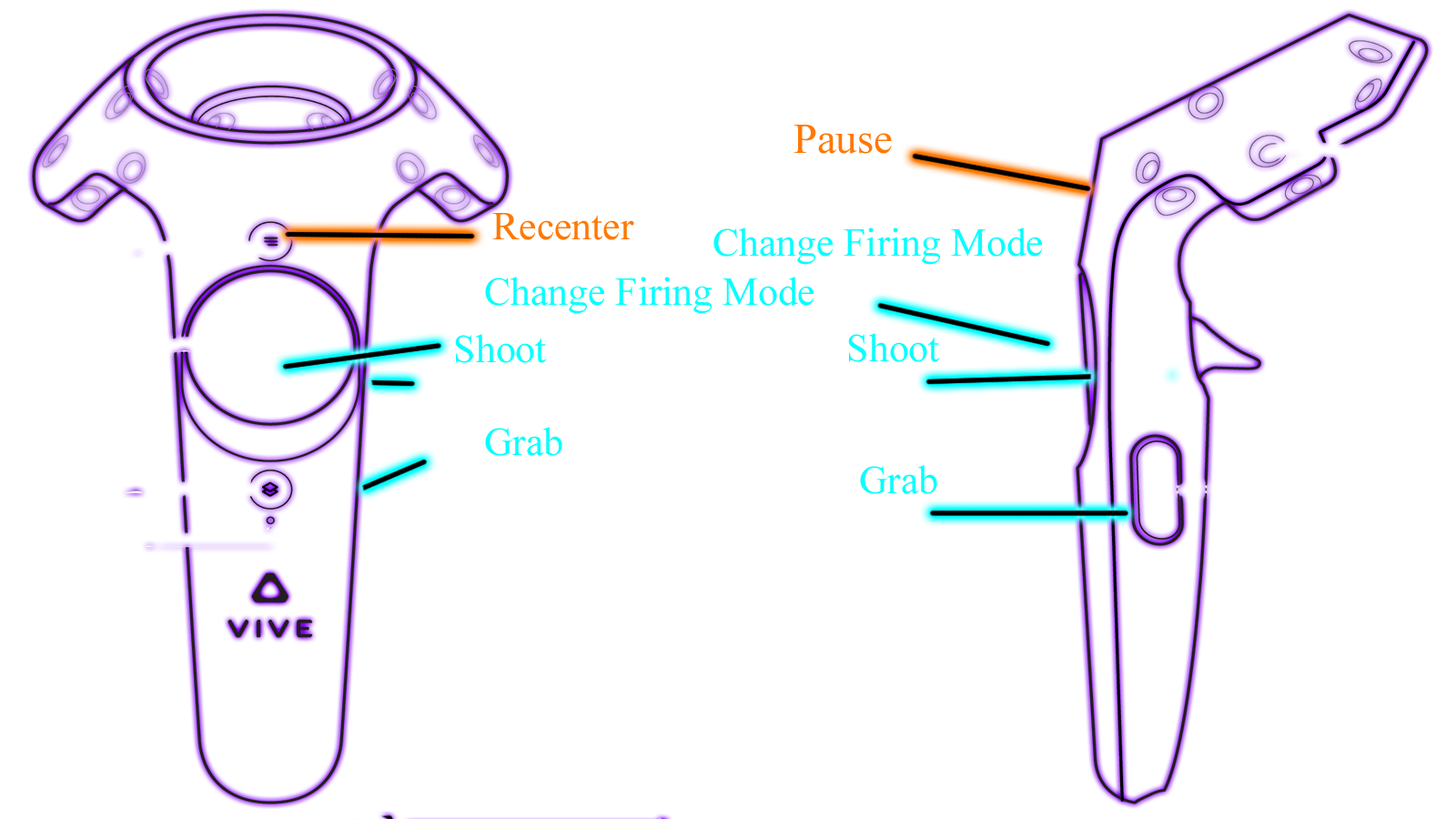
<style>
.page{position:relative;width:1456px;height:819px;background:#ffffff}
.page>*{position:absolute;margin:0}
.t1{font:42.6px "TimesNewRomanPSMT";color:#ff7800}
.t2{font:39.7px "TimesNewRomanPSMT";color:#ff7800}
.t3{font:39.7px "TimesNewRomanPSMT";color:#00ffff}
</style>
<div class="page">
<p class="t1" style="left:794px;top:125px;width:98px;height:29px">Pause</p>
<p class="t2" style="left:492px;top:213px;width:142px;height:27px">Recenter</p>
<p class="t3" style="left:713px;top:227px;width:329px;height:38px">Change Firing Mode</p>
<p class="t3" style="left:485px;top:277px;width:329px;height:37px">Change Firing Mode</p>
<p class="t3" style="left:455px;top:334px;width:92px;height:29px">Shoot</p>
<p class="t3" style="left:848px;top:333px;width:92px;height:29px">Shoot</p>
<p class="t3" style="left:485px;top:427px;width:77px;height:29px">Grab</p>
<p class="t3" style="left:860px;top:465px;width:77px;height:29px">Grab</p>
</div>
